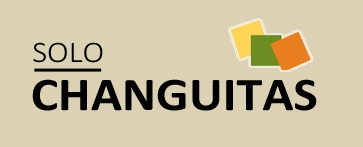
<style>
.page{position:relative;width:363px;height:147px;background:#dbd1b3}
.page>*{position:absolute;margin:0}
.t1{font:30px "Calibri-Light";color:#000000;scale:1.1 1}
.t2{font:47px "Calibri-Bold";color:#000000;scale:1.1 1}
</style>
<div class="page">
<p class="t1" style="left:33px;top:42px;width:70px;height:21px">SOLO</p>
<p class="t2" style="left:32px;top:79px;width:285px;height:32px">CHANGUITAS</p>
</div>
